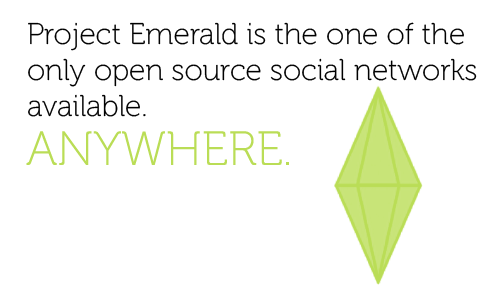
<style>
.page{position:relative;width:500px;height:300px;background:#ffffff}
.page>*{position:absolute;margin:0}
.t1{font:30px "Museo100-Regular";color:#000000}
.t2{font:48px "Museo100-Regular";color:#badd56}
</style>
<div class="page">
<p class="t1" style="left:28px;top:22px;width:449px;height:95px">Project Emerald is the one of the<br>only open source social networks <br>available.</p>
<p class="t2" style="left:26px;top:131px;width:263px;height:34px">ANYWHERE.</p>
</div>
